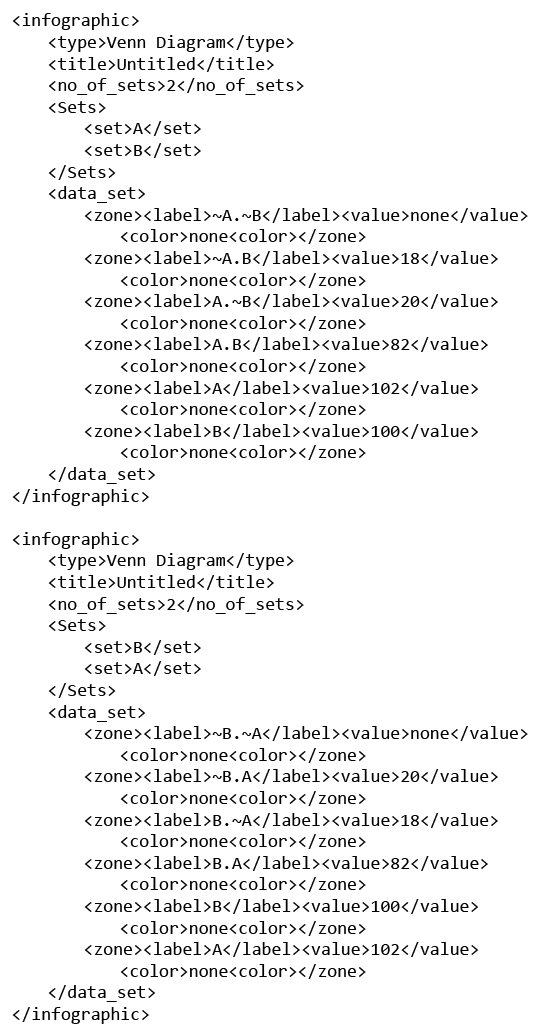
<style>
.page{position:relative;width:545px;height:1033px;background:#ffffff}
.page>*{position:absolute;margin:0}
.t1{font:18px "Consolas";color:#000000}
</style>
<div class="page">
<p class="t1" style="left:12px;top:13px;width:516px;height:1011px">&lt;infographic&gt; <br> &lt;type&gt;Venn Diagram&lt;/type&gt; <br> &lt;title&gt;Untitled&lt;/title&gt;<br> &lt;no_of_sets&gt;2&lt;/no_of_sets&gt;<br> &lt;Sets&gt;<br>  &lt;set&gt;A&lt;/set&gt; <br>  &lt;set&gt;B&lt;/set&gt; <br> &lt;/Sets&gt; <br> &lt;data_set&gt;<br>  &lt;zone&gt;&lt;label&gt;~A.~B&lt;/label&gt;&lt;value&gt;none&lt;/value&gt;<br>   &lt;color&gt;none&lt;color&gt;&lt;/zone&gt;<br>  &lt;zone&gt;&lt;label&gt;~A.B&lt;/label&gt;&lt;value&gt;18&lt;/value&gt;<br>   &lt;color&gt;none&lt;color&gt;&lt;/zone&gt;<br>  &lt;zone&gt;&lt;label&gt;A.~B&lt;/label&gt;&lt;value&gt;20&lt;/value&gt;<br>   &lt;color&gt;none&lt;color&gt;&lt;/zone&gt;<br>  &lt;zone&gt;&lt;label&gt;A.B&lt;/label&gt;&lt;value&gt;82&lt;/value&gt;<br>   &lt;color&gt;none&lt;color&gt;&lt;/zone&gt;<br>  &lt;zone&gt;&lt;label&gt;A&lt;/label&gt;&lt;value&gt;102&lt;/value&gt;<br>   &lt;color&gt;none&lt;color&gt;&lt;/zone&gt;<br>  &lt;zone&gt;&lt;label&gt;B&lt;/label&gt;&lt;value&gt;100&lt;/value&gt;<br>   &lt;color&gt;none&lt;color&gt;&lt;/zone&gt;<br> &lt;/data_set&gt; <br>&lt;/infographic&gt;<br><br>&lt;infographic&gt; <br> &lt;type&gt;Venn Diagram&lt;/type&gt; <br> &lt;title&gt;Untitled&lt;/title&gt;<br> &lt;no_of_sets&gt;2&lt;/no_of_sets&gt;<br> &lt;Sets&gt;<br>  &lt;set&gt;B&lt;/set&gt; <br>  &lt;set&gt;A&lt;/set&gt; <br> &lt;/Sets&gt; <br> &lt;data_set&gt;<br>  &lt;zone&gt;&lt;label&gt;~B.~A&lt;/label&gt;&lt;value&gt;none&lt;/value&gt;<br>   &lt;color&gt;none&lt;color&gt;&lt;/zone&gt;<br>  &lt;zone&gt;&lt;label&gt;~B.A&lt;/label&gt;&lt;value&gt;20&lt;/value&gt;<br>   &lt;color&gt;none&lt;color&gt;&lt;/zone&gt;<br>  &lt;zone&gt;&lt;label&gt;B.~A&lt;/label&gt;&lt;value&gt;18&lt;/value&gt;<br>   &lt;color&gt;none&lt;color&gt;&lt;/zone&gt;<br>  &lt;zone&gt;&lt;label&gt;B.A&lt;/label&gt;&lt;value&gt;82&lt;/value&gt;<br>   &lt;color&gt;none&lt;color&gt;&lt;/zone&gt;<br>  &lt;zone&gt;&lt;label&gt;B&lt;/label&gt;&lt;value&gt;100&lt;/value&gt;<br>   &lt;color&gt;none&lt;color&gt;&lt;/zone&gt;<br>  &lt;zone&gt;&lt;label&gt;A&lt;/label&gt;&lt;value&gt;102&lt;/value&gt;<br>   &lt;color&gt;none&lt;color&gt;&lt;/zone&gt;<br> &lt;/data_set&gt; <br>&lt;/infographic&gt;</p>
</div>
